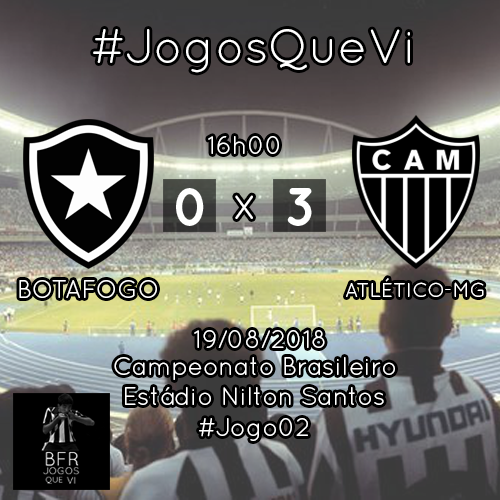
<style>
.page{position:relative;width:500px;height:500px}
.page>*{position:absolute;margin:0}
.t1{font:48px "QuicksandBook-Regular";color:#ffffff}
.t2{font:25px "QuicksandBook-Regular";color:#ffffff}
.t3{font:20.2px "QuicksandBook-Regular";color:#ffffff}
</style>
<div class="page">
<p class="t1" style="left:93px;top:29px;width:317px;height:44px">#JogosQueVi</p>
<p class="t2" style="left:208px;top:136px;width:71px;height:18px">16h00</p>
<p class="t1" style="left:178px;top:190px;width:24px;height:34px">0</p>
<p class="t1" style="left:235px;top:195px;width:18px;height:24px">x</p>
<p class="t1" style="left:289px;top:190px;width:21px;height:34px">3</p>
<p class="t2" style="left:19px;top:280px;width:138px;height:18px">BOTAFOGO</p>
<p class="t3" style="left:346px;top:278px;width:138px;height:19px">ATLÉTICO-MG</p>
<p class="t2" style="left:194px;top:330px;width:131px;height:18px">19/08/2018</p>
<p class="t2" style="left:114px;top:357px;width:281px;height:23px">Campeonato Brasileiro</p>
<p class="t2" style="left:125px;top:387px;width:259px;height:18px">Estádio Nilton Santos</p>
<p class="t2" style="left:199px;top:418px;width:109px;height:23px">#Jogo02</p>
</div>
